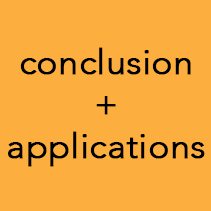
<style>
.page{position:relative;width:211px;height:211px;background:#fcaf3e}
.page>*{position:absolute;margin:0}
.t1{font:35px "Avenir-Light";color:#000000;font-weight:bold}
</style>
<div class="page">
<p class="t1" style="left:8px;top:47px;width:197px;height:120px;text-align:center">conclusion<br>+<br>applications</p>
</div>
